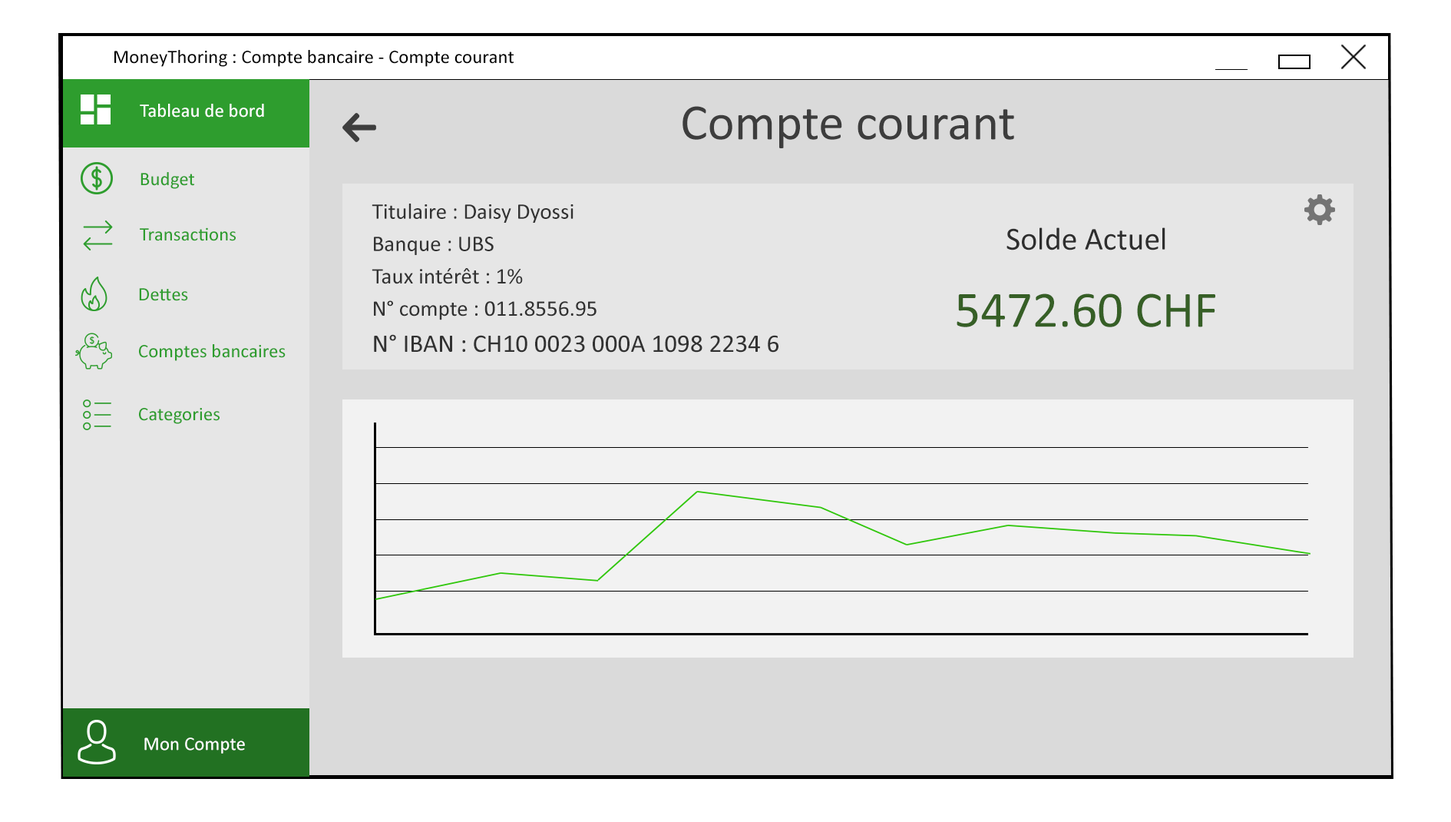
<style>
.page{position:relative;width:1451px;height:822px;background:#e6e6e6}
.page>*{position:absolute;margin:0}
.t1{font:19.2px "Calibri";color:#010101}
.t2{font:19.2px "Calibri";color:#ffffff}
.t3{font:51.2px "Calibri";color:#3d3d3d}
.t4{font:19.2px "Calibri";color:#2e9d2e}
.t5{font:22.4px "Calibri";color:#323232}
.t6{font:25.6px "Calibri";color:#323232}
.t7{font:32px "Calibri";color:#2e2e2e}
.t8{font:51.2px "Calibri";color:#365f26}
</style>
<div class="page">
<p class="t1" style="left:114px;top:50px;width:400px;height:17px">MoneyThoring : Compte bancaire - Compte courant</p>
<p class="t2" style="left:140px;top:104px;width:124px;height:13px">Tableau de bord</p>
<p class="t3" style="left:683px;top:106px;width:331px;height:42px">Compte courant</p>
<p class="t4" style="left:141px;top:172px;width:53px;height:17px">Budget</p>
<p class="t5" style="left:372px;top:203px;width:407px;height:149px">Titulaire : Daisy Dyossi<br>Banque : UBS<br>Taux intérêt : 1%<br>N° compte : 011.8556.95<br><span class="t6">N° IBAN : CH10 0023 000A 1098 2234 6</span></p>
<p class="t4" style="left:140px;top:227px;width:96px;height:14px">Transactions</p>
<p class="t7" style="left:1007px;top:227px;width:159px;height:23px">Solde Actuel</p>
<p class="t4" style="left:139px;top:288px;width:49px;height:13px">Dettes</p>
<p class="t8" style="left:957px;top:293px;width:259px;height:34px">5472.60 CHF</p>
<p class="t4" style="left:139px;top:344px;width:147px;height:17px">Comptes bancaires</p>
<p class="t4" style="left:139px;top:408px;width:81px;height:16px">Categories</p>
<p class="t2" style="left:144px;top:737px;width:101px;height:16px">Mon Compte</p>
</div>
